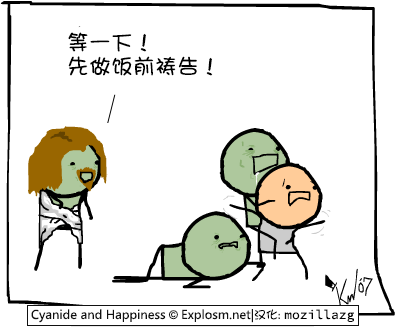
<style>
.page{position:relative;width:396px;height:328px;background:#ffffff}
.page>*{position:absolute;margin:0}
.t1{font:22px/24px "DFGirl";color:#000000}
</style>
<div class="page">
<p class="t1" style="left:68px;top:32px;width:145px;height:44px">等一下！<br>先做饭前祷告！</p>
</div>
